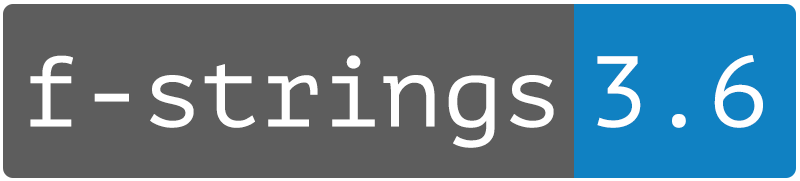
<style>
.page{position:relative;width:800px;height:181px;background:#5d5d5d}
.page>*{position:absolute;margin:0}
.t1{font:100px "PTMono-Regular";color:#ffffff}
</style>
<div class="page">
<p class="t1" style="left:30px;top:55px;width:524px;height:93px">f-strings</p>
<p class="t1" style="left:597px;top:55px;width:166px;height:73px">3.6</p>
</div>
